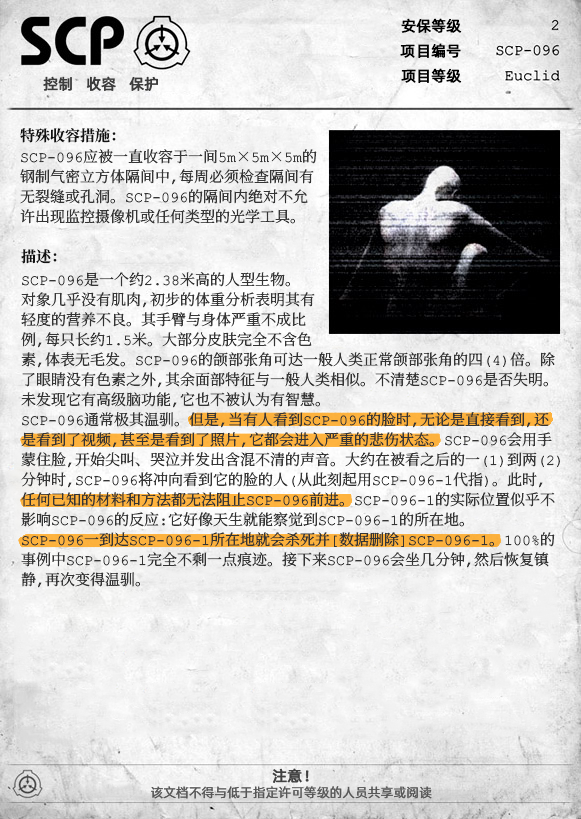
<style>
.page{position:relative;width:581px;height:819px}
.page>*{position:absolute;margin:0}
.t1{font:15px "AlibabaPuHuiTiR";color:#000000;font-weight:bold}
.t2{font:15px "AlibabaPuHuiTiR";color:#3d3d3d;font-weight:bold}
.t3{font:15px "ContainmentBreach-Bold";color:#121212}
.t4{font:15px/20px "ContainmentBreach-Regular";color:#353535}
.t5{font:15px "AlibabaPuHuiTiR";color:#414141;font-weight:bold}
.t6{font:13px "AlibabaPuHuiTiR";color:#575757}
</style>
<div class="page">
<p class="t1" style="left:401px;top:18px;width:61px;height:15px">安保等级</p>
<p class="t1" style="left:400px;top:43px;width:61px;height:15px">项目编号</p>
<p class="t2" style="left:43px;top:76px;width:115px;height:15px">控制   收容   保护</p>
<p class="t1" style="left:401px;top:68px;width:61px;height:15px">项目等级</p>
<p class="t3" style="left:20px;top:128px;width:96px;height:15px">特殊收容措施：</p>
<p class="t4" style="left:20px;top:149px;width:297px;height:75px">SCP-096应被一直收容于一间5m×5m×5m的<br>钢制气密立方体隔间中，每周必须检查隔间有<br>无裂缝或孔洞。SCP-096的隔间内绝对不允<br>许出现监控摄像机或任何类型的光学工具。</p>
<p class="t3" style="left:21px;top:249px;width:36px;height:15px">描述：</p>
<p class="t4" style="left:21px;top:272px;width:539px;height:316px">SCP-096是一个约2.38米高的人型生物。<br>对象几乎没有肌肉，初步的体重分析表明其有<br>轻度的营养不良。其手臂与身体严重不成比<br>例，每只长约1.5米。大部分皮肤完全不含色<br>素，体表无毛发。SCP-096的颌部张角可达一般人类正常颌部张角的四（4）倍。除<br>了眼睛没有色素之外，其余面部特征与一般人类相似。不清楚SCP-096是否失明。<br>未发现它有高级脑功能，它也不被认为有智慧。<br>SCP-096通常极其温驯。但是，当有人看到SCP-096的脸时，无论是直接看到，还<br>是看到了视频，甚至是看到了照片，它都会进入严重的悲伤状态。SCP-096会用手<br>蒙住脸，开始尖叫、哭泣并发出含混不清的声音。大约在被看之后的一（1）到两（2）<br>分钟时，SCP-096将冲向看到它的脸的人（从此刻起用SCP-096-1代指）。此时，<br>任何已知的材料和方法都无法阻止SCP-096前进。SCP-096-1的实际位置似乎不<br>影响SCP-096的反应：它好像天生就能察觉到SCP-096-1的所在地。<br>SCP-096一到达SCP-096-1所在地就会杀死并[数据删除]SCP-096-1。100%的<br>事例中SCP-096-1完全不剩一点痕迹。接下来SCP-096会坐几分钟，然后恢复镇<br>静，再次变得温驯。</p>
<p class="t5" style="left:272px;top:768px;width:37px;height:15px">注意！</p>
<p class="t6" style="left:151px;top:786px;width:281px;height:13px">该文档不得与低于指定许可等级的人员共享或阅读</p>
</div>
